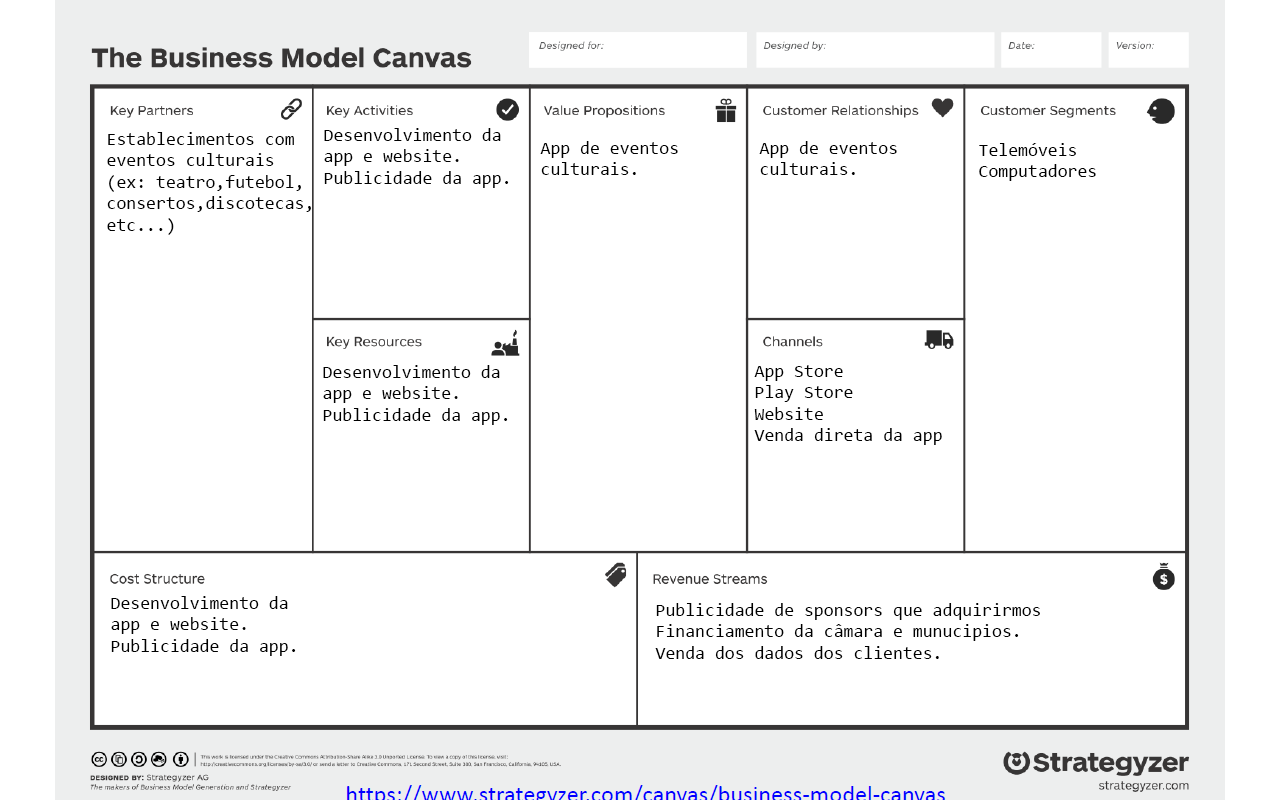
<style>
.page{position:relative;width:1280px;height:800px;background:#ffffff}
.page>*{position:absolute;margin:0}
.t1{font:18px "Consolas";color:#000000}
</style>
<div class="page">
<p class="t1" style="left:107px;top:132px;width:204px;height:103px">Establecimentos com<br>eventos culturais<br>(ex: teatro,futebol,<br>consertos,discotecas,<br>etc...)</p>
<p class="t1" style="left:324px;top:128px;width:185px;height:60px">Desenvolvimento da <br>app e website.<br>Publicidade da app.</p>
<p class="t1" style="left:540px;top:141px;width:138px;height:34px">App de eventos <br>culturais.</p>
<p class="t1" style="left:759px;top:141px;width:138px;height:34px">App de eventos <br>culturais.</p>
<p class="t1" style="left:979px;top:143px;width:117px;height:38px">Telemóveis<br>Computadores</p>
<p class="t1" style="left:323px;top:365px;width:185px;height:60px">Desenvolvimento da <br>app e website.<br>Publicidade da app.</p>
<p class="t1" style="left:754px;top:365px;width:188px;height:80px">App Store<br>Play Store<br>Website<br>Venda direta da app</p>
<p class="t1" style="left:111px;top:596px;width:185px;height:60px">Desenvolvimento da <br>app e website.<br>Publicidade da app.</p>
<p class="t1" style="left:655px;top:603px;width:385px;height:56px">Publicidade de sponsors que adquirirmos<br>Financiamento da câmara e munucipios.<br>Venda dos dados dos clientes.</p>
</div>
